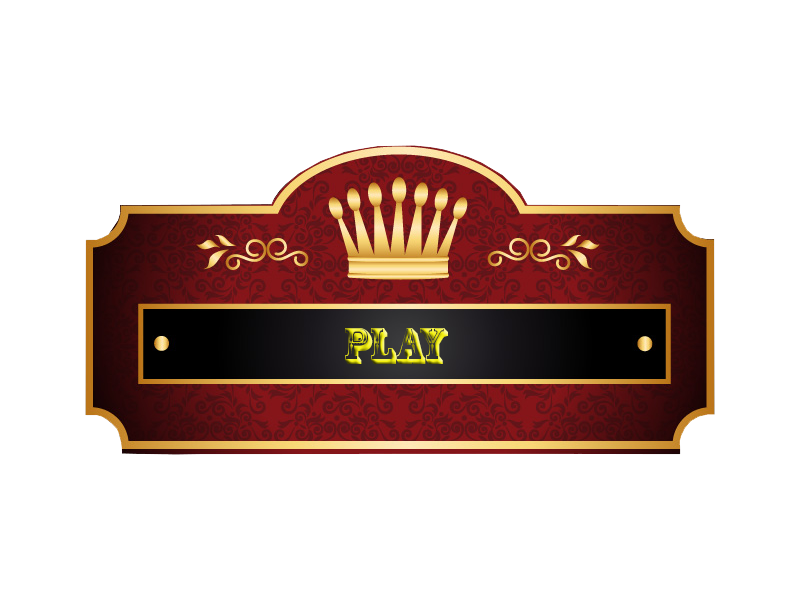
<style>
.page{position:relative;width:800px;height:600px;background:#ffffff}
.page>*{position:absolute;margin:0}
.t1{font:48px "RosewoodStd-Regular"}
</style>
<div class="page">
<p class="t1" style="left:345px;top:328px;width:103px;height:36px">PLAY</p>
</div>
